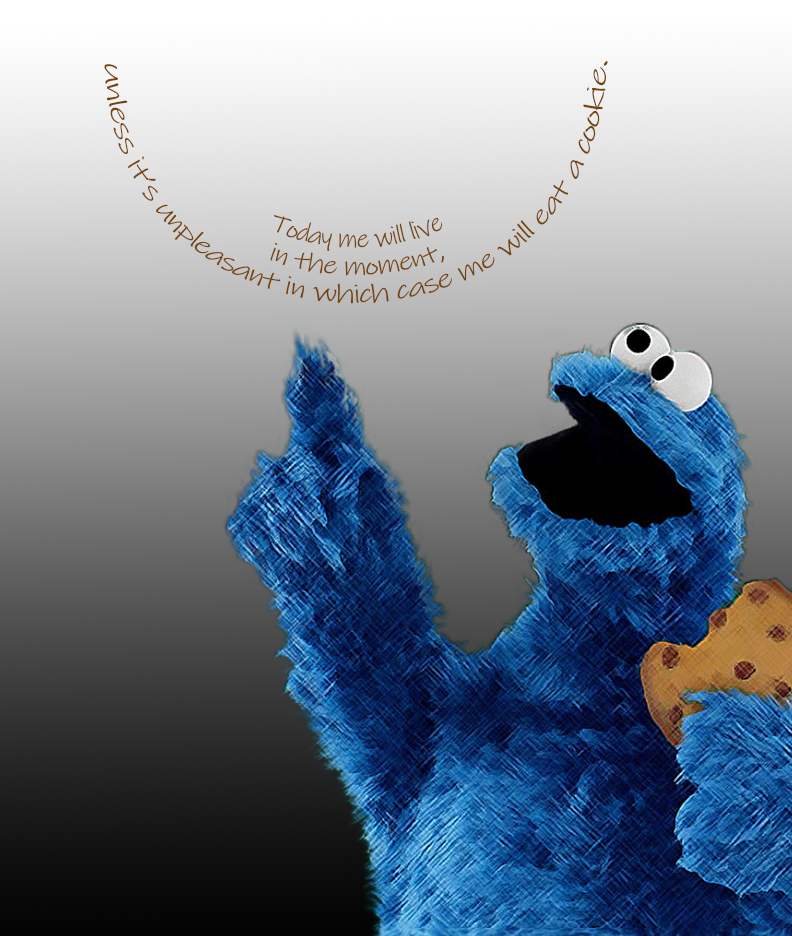
<style>
.page{position:relative;width:792px;height:936px}
.page>*{position:absolute;margin:0}
.t1{font:16px/17px "InkFree";letter-spacing:-0.06em;color:#75440a}
.t2{font:16px/17px "InkFree";letter-spacing:-0.06em;color:#986212}
</style>
<div class="page">
<p class="t1" style="left:104px;top:60px;width:504px;height:244px;text-align:center"><span class="t2"><br></span>Today me will live<br>in the moment,<br> unless it’s unpleasant in which case me will eat a cookie.</p>
</div>
